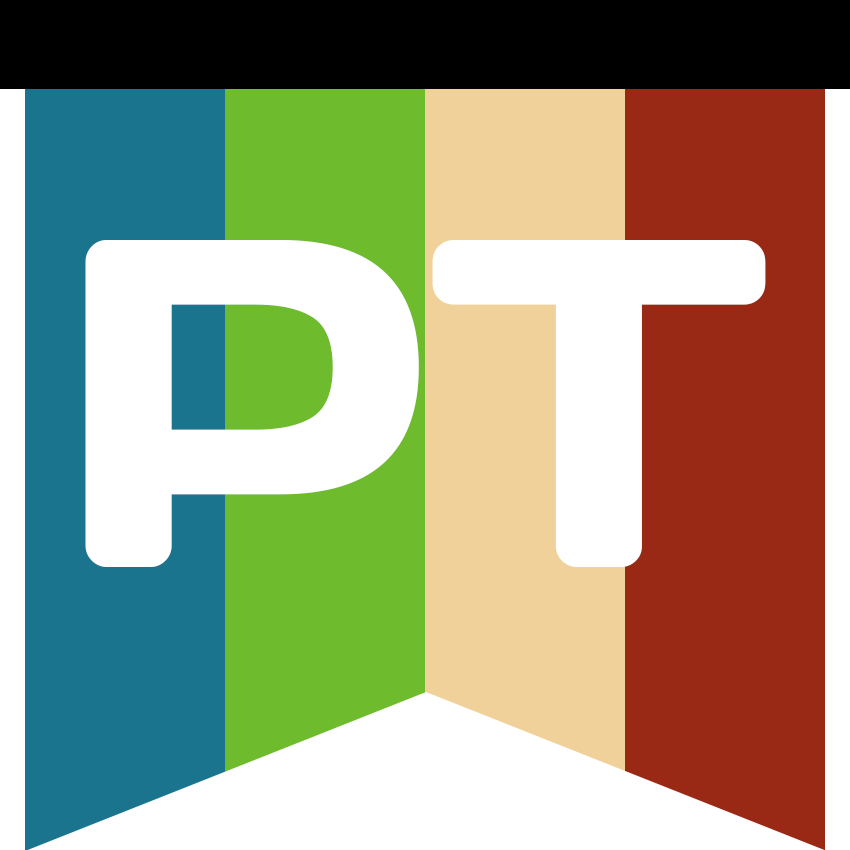
<style>
.page{position:relative;width:850px;height:850px;background:#ffffff}
.page>*{position:absolute;margin:0}
.t1{font:466.7px "DaysOne-Regular";color:#ffffff}
</style>
<div class="page">
<p class="t1" style="left:85px;top:240px;width:681px;height:327px">PT</p>
</div>
